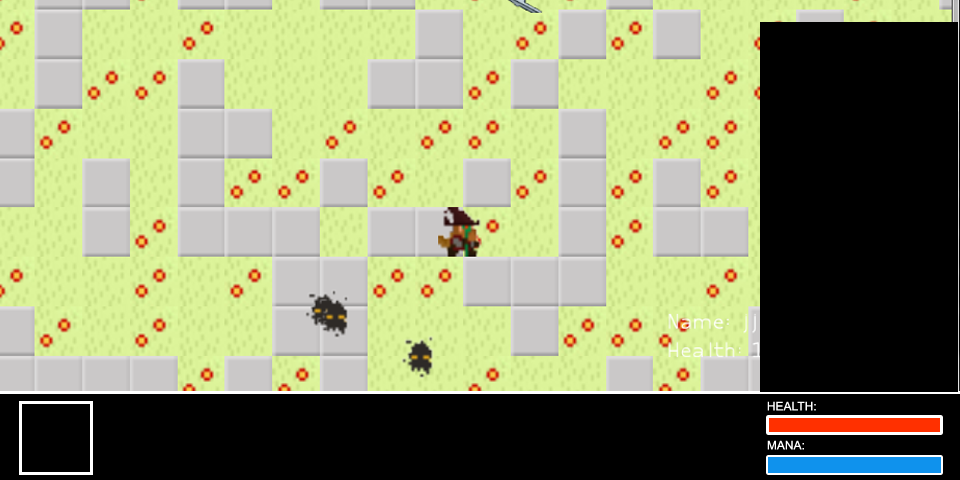
<style>
.page{position:relative;width:960px;height:480px;background:#000000}
.page>*{position:absolute;margin:0}
.t1{font:12px "ArialMT";color:#ffffff}
</style>
<div class="page">
<p class="t1" style="left:767px;top:401px;width:49px;height:10px">HEALTH:</p>
<p class="t1" style="left:767px;top:440px;width:37px;height:10px">MANA:</p>
</div>
